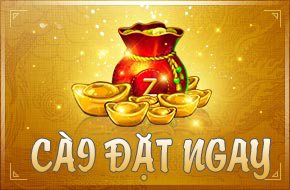
<style>
.page{position:relative;width:290px;height:190px}
.page>*{position:absolute;margin:0}
.t1{font:40px "VNI-BriquetNormal"}
</style>
<div class="page">
<p class="t1" style="left:31px;top:131px;width:239px;height:50px">CAØI ÑAËT NGAY</p>
<p class="t1" style="left:31px;top:131px;width:239px;height:50px">CAØI ÑAËT NGAY</p>
</div>
